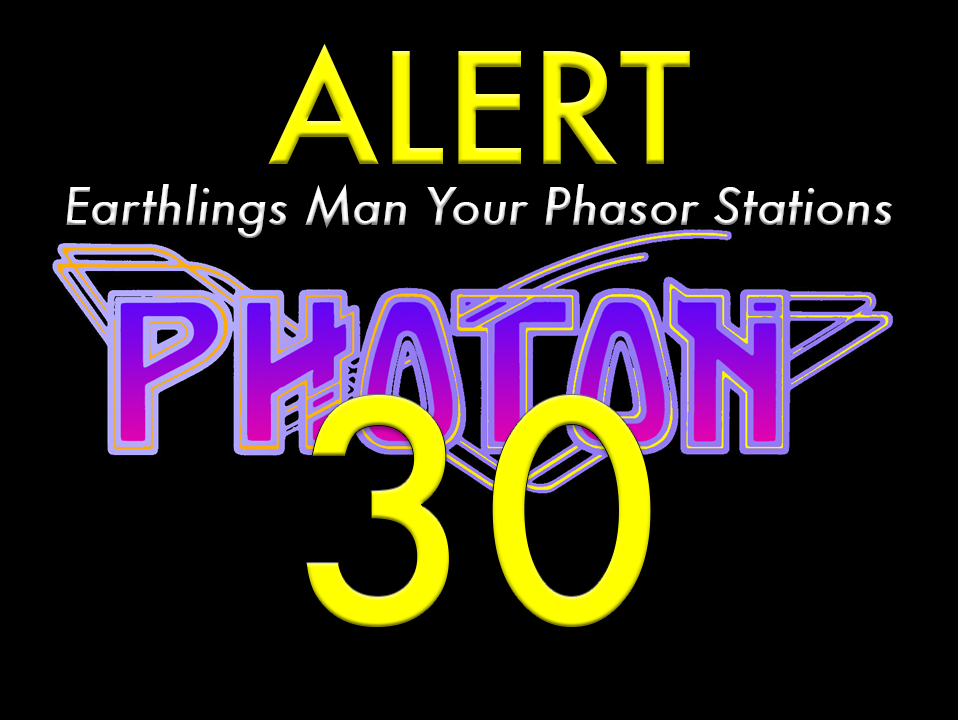
<style>
.page{position:relative;width:958px;height:720px;background:#000000}
.page>*{position:absolute;margin:0}
.t1{font:150px "Futura-Medium";color:#ffff00}
.t2{font:50px "Futura-MediumItalic";color:#ffffff}
.t3{font:300px "Futura-Medium";color:#ffff00}
</style>
<div class="page">
<p class="t1" style="left:268px;top:44px;width:422px;height:120px">ALERT</p>
<p class="t2" style="left:66px;top:184px;width:826px;height:54px">Earthlings Man Your Phasor Stations</p>
<p class="t3" style="left:305px;top:394px;width:347px;height:234px">30</p>
</div>
